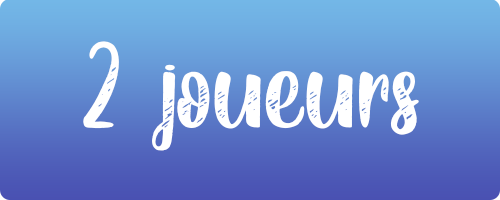
<style>
.page{position:relative;width:500px;height:200px}
.page>*{position:absolute;margin:0}
.t1{font:146.6px "BlackParadePersonalUse";color:#ffffff}
</style>
<div class="page">
<p class="t1" style="left:83px;top:41px;width:336px;height:110px">2 joueurs</p>
</div>
